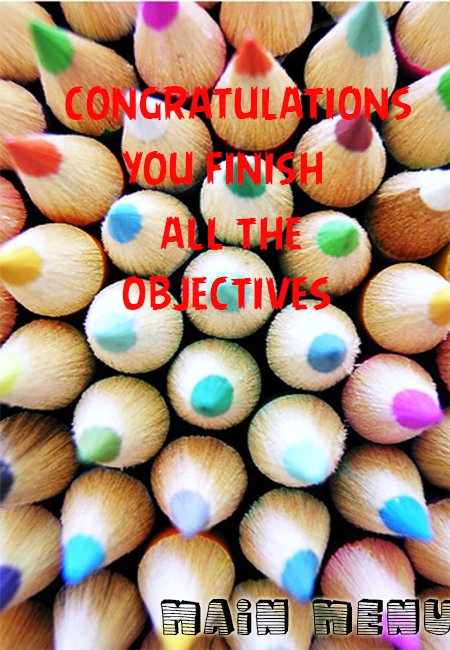
<style>
.page{position:relative;width:450px;height:650px}
.page>*{position:absolute;margin:0}
.t1{font:50px "AngryBirds-Regular";color:#ff0808}
</style>
<div class="page">
<p class="t1" style="left:65px;top:86px;width:346px;height:35px">congratulations</p>
<p class="t1" style="left:121px;top:151px;width:202px;height:35px">you finish</p>
<p class="t1" style="left:122px;top:216px;width:208px;height:95px;text-align:center">all the <br>objectives</p>
</div>
